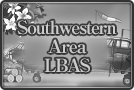
<style>
.page{position:relative;width:134px;height:90px}
.page>*{position:absolute;margin:0}
.t1{font:18px/19px "RyuminPro-ExBold";letter-spacing:-0.08em;color:#cccccc}
</style>
<div class="page">
<p class="t1" style="left:17px;top:20px;width:100px;height:53px;text-align:center">Southwestern<br>Area<br>LBAS</p>
</div>
